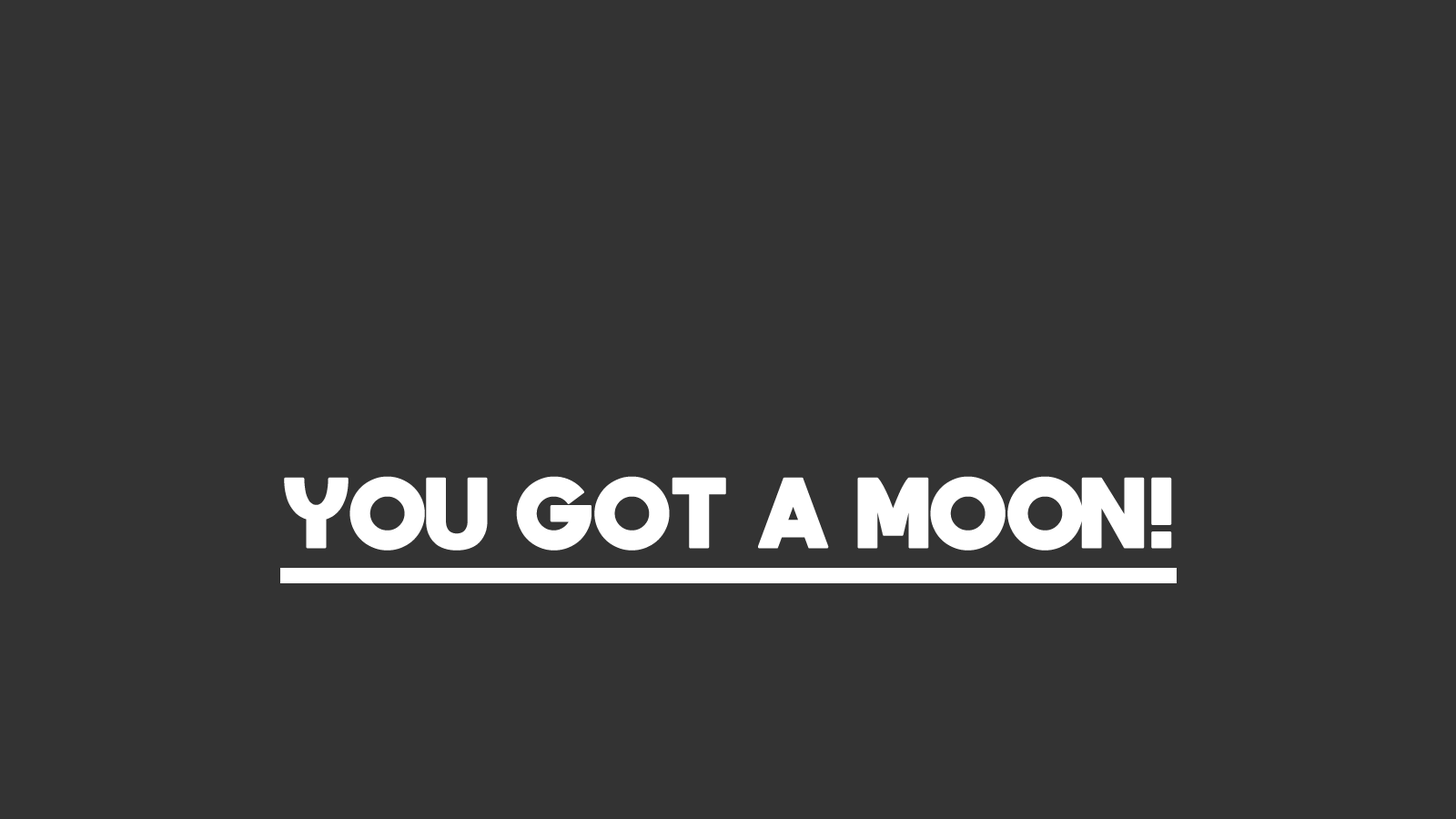
<style>
.page{position:relative;width:1456px;height:819px;background:#333333}
.page>*{position:absolute;margin:0}
.t1{font:70.8px "moon_get-Heavy";color:#ffffff}
</style>
<div class="page">
<p class="t1" style="left:284px;top:476px;width:888px;height:75px">YOU GOT A MOON!</p>
</div>
